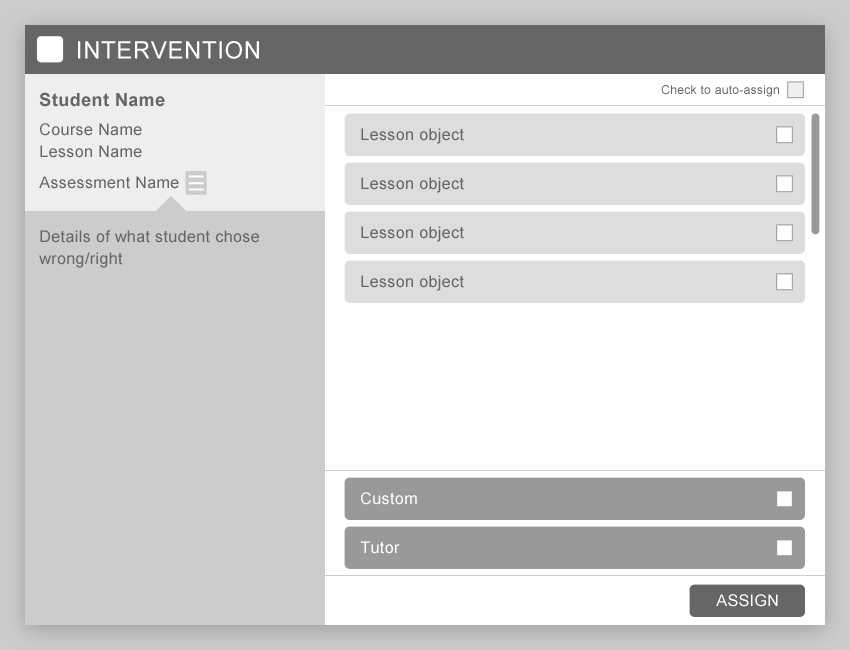
<style>
.page{position:relative;width:850px;height:650px;background:#ffffff}
.page>*{position:absolute;margin:0}
.t1{font:24px "ArialMT";letter-spacing:0.025em;color:#ffffff}
.t2{font:12px "ArialMT";letter-spacing:0.025em;color:#666666}
.t3{font:18px "Arial-BoldMT";letter-spacing:0.025em;color:#666666}
.t4{font:16px/22px "ArialMT";letter-spacing:0.025em;color:#666666}
.t5{font:16px "ArialMT";letter-spacing:0.025em;color:#666666}
.t6{font:16px "ArialMT";letter-spacing:0.025em;color:#ffffff}
</style>
<div class="page">
<p class="t1" style="left:78px;top:41px;width:181px;height:18px">INTERVENTION</p>
<p class="t2" style="left:661px;top:85px;width:118px;height:12px">Check to auto-assign</p>
<p class="t3" style="left:39px;top:92px;width:126px;height:15px">Student Name</p>
<p class="t4" style="left:40px;top:123px;width:102px;height:35px">Course Name<br>Lesson Name</p>
<p class="t5" style="left:361px;top:128px;width:103px;height:16px">Lesson object</p>
<p class="t5" style="left:39px;top:176px;width:140px;height:13px">Assessment Name</p>
<p class="t5" style="left:361px;top:177px;width:103px;height:16px">Lesson object</p>
<p class="t4" style="left:39px;top:230px;width:220px;height:38px">Details of what student chose<br>wrong/right</p>
<p class="t5" style="left:361px;top:226px;width:103px;height:16px">Lesson object</p>
<p class="t5" style="left:361px;top:275px;width:103px;height:16px">Lesson object</p>
<p class="t6" style="left:361px;top:492px;width:56px;height:13px">Custom</p>
<p class="t6" style="left:360px;top:541px;width:40px;height:13px">Tutor</p>
<p class="t6" style="left:716px;top:594px;width:62px;height:13px">ASSIGN</p>
</div>
